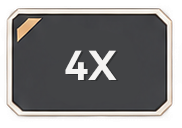
<style>
.page{position:relative;width:182px;height:128px;background:#424345}
.page>*{position:absolute;margin:0}
.t1{font:40px "HarmonyOS_Sans_SC_Bold";letter-spacing:-0.01em;color:#f4f3f2}
</style>
<div class="page">
<p class="t1" style="left:65px;top:50px;width:52px;height:30px">4X</p>
</div>
